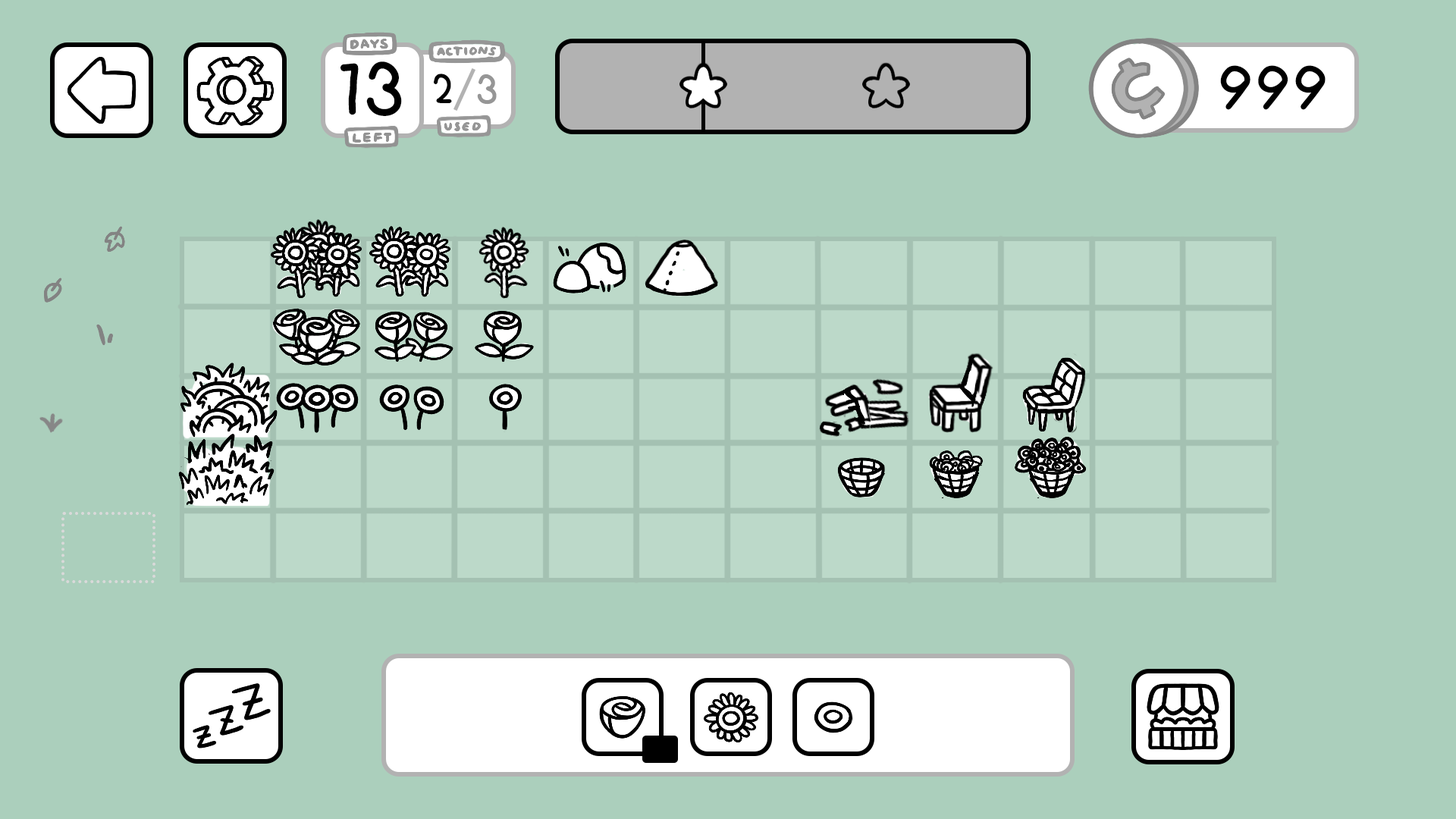
<style>
.page{position:relative;width:1456px;height:819px;background:#abcfbc}
.page>*{position:absolute;margin:0}
.t1{font:69.5px "FuturaHandwritten";color:#000000;font-weight:bold}
.t2{font:56.9px "FuturaHandwritten";color:#000000;font-weight:bold}
.t3{font:37.9px "FuturaHandwritten";color:#000000;font-weight:bold}
.t4{font:37.9px "FuturaHandwritten";color:#969696;font-weight:bold}
</style>
<div class="page">
<p class="t1" style="left:340px;top:61px;width:62px;height:55px">13</p>
<p class="t2" style="left:1220px;top:65px;width:106px;height:45px">999</p>
<p class="t3" style="left:434px;top:74px;width:18px;height:29px">2</p>
<p class="t4" style="left:477px;top:74px;width:20px;height:31px">3</p>
</div>
